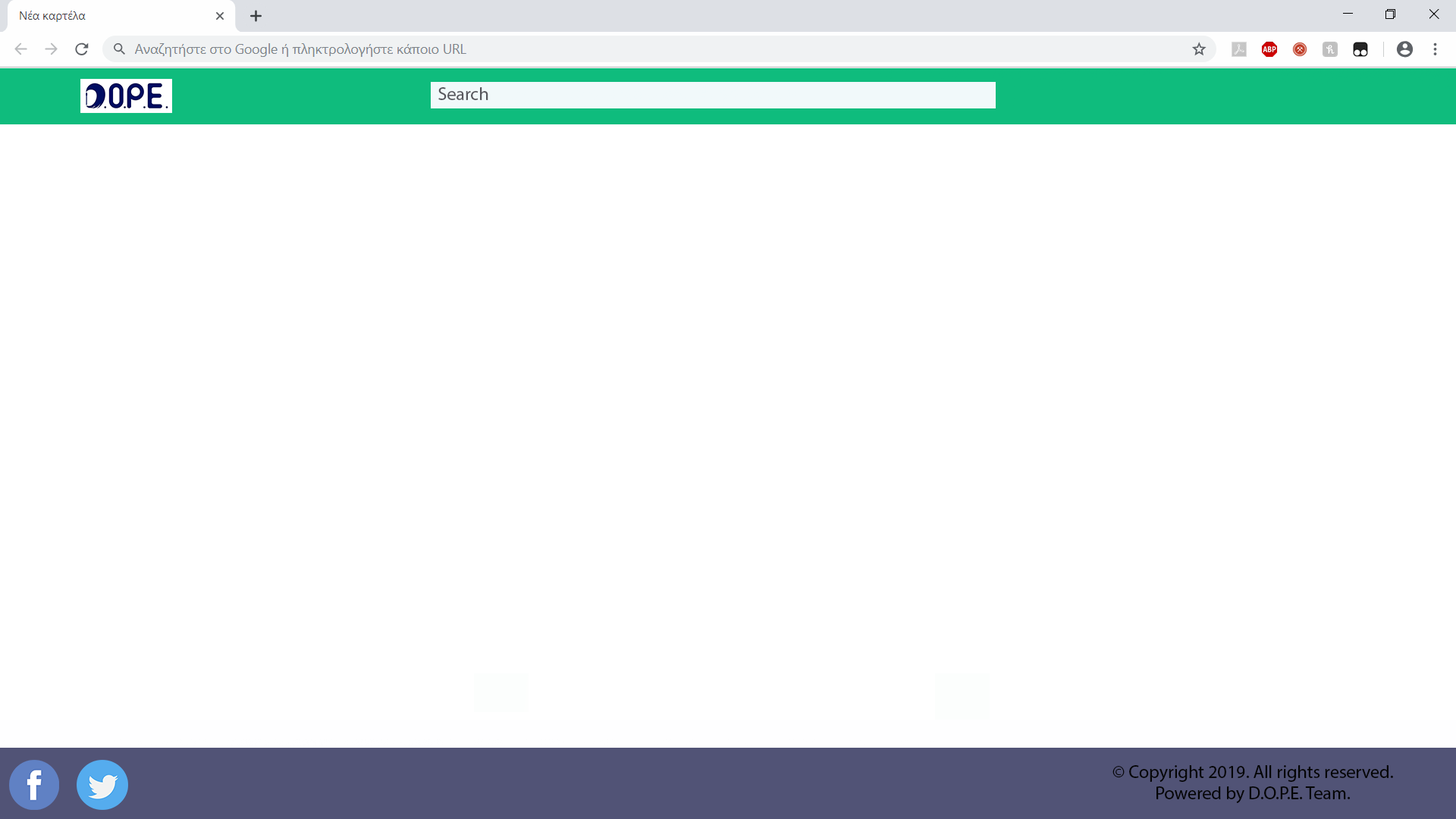
<style>
.page{position:relative;width:1456px;height:819px;background:#ffffff}
.page>*{position:absolute;margin:0}
.t1{font:18.2px "MyriadPro-Regular";color:#57575d}
.t2{font:18.2px "MyriadPro-Regular";color:#050505}
</style>
<div class="page">
<p class="t1" style="left:438px;top:87px;width:50px;height:13px">Search</p>
<p class="t2" style="left:1112px;top:765px;width:281px;height:38px;text-align:center">© Copyright 2019. All rights reserved. Powered by D.O.P.E. Team.</p>
</div>
